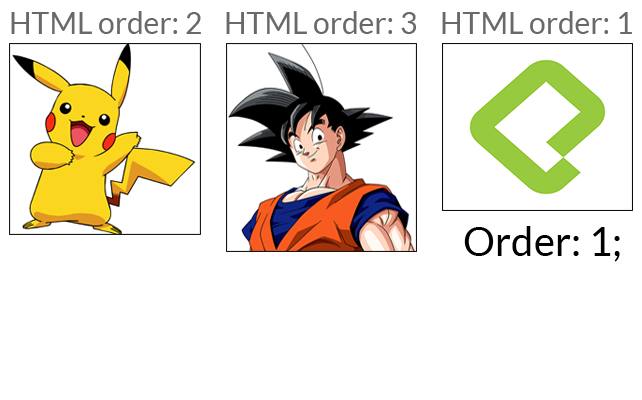
<style>
.page{position:relative;width:642px;height:400px;background:#ffffff}
.page>*{position:absolute;margin:0}
.t1{font:30px "Lato-Regular";color:#6a6969}
.t2{font:40px "Lato-Regular";color:#000000}
</style>
<div class="page">
<p class="t1" style="left:11px;top:11px;width:190px;height:23px">HTML order: 2</p>
<p class="t1" style="left:226px;top:11px;width:190px;height:23px">HTML order: 3</p>
<p class="t1" style="left:442px;top:11px;width:190px;height:23px">HTML order: 1</p>
<p class="t2" style="left:464px;top:226px;width:156px;height:36px">Order: 1;</p>
</div>
